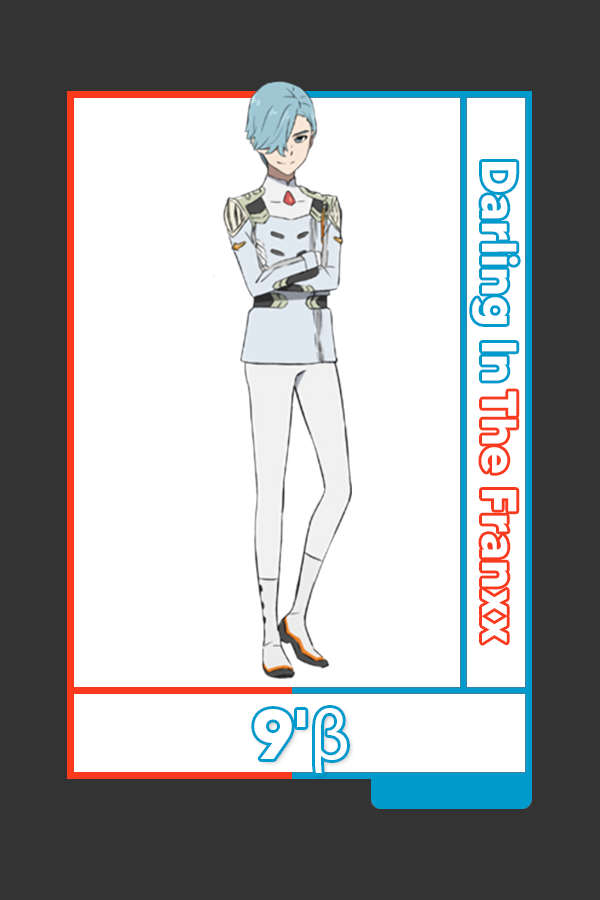
<style>
.page{position:relative;width:600px;height:900px;background:#ffffff}
.page>*{position:absolute;margin:0}
.t1{font:48.8px "MADETOMMY-Bold";color:#ffffff}
.t2{font:70.1px "MADETOMMY-Bold";color:#ffffff}
.t3{font:70.1px "MyriadPro-Regular";color:#ffffff}
</style>
<div class="page">
<p class="t1" style="left:472px;top:162px;width:46px;height:219px;rotate:90deg">Darling In</p>
<p class="t1" style="left:481px;top:391px;width:36px;height:252px;rotate:90deg">The Franxx</p>
<p class="t2" style="left:254px;top:708px;width:93px;height:65px">9'<span class="t3">β</span></p>
</div>
